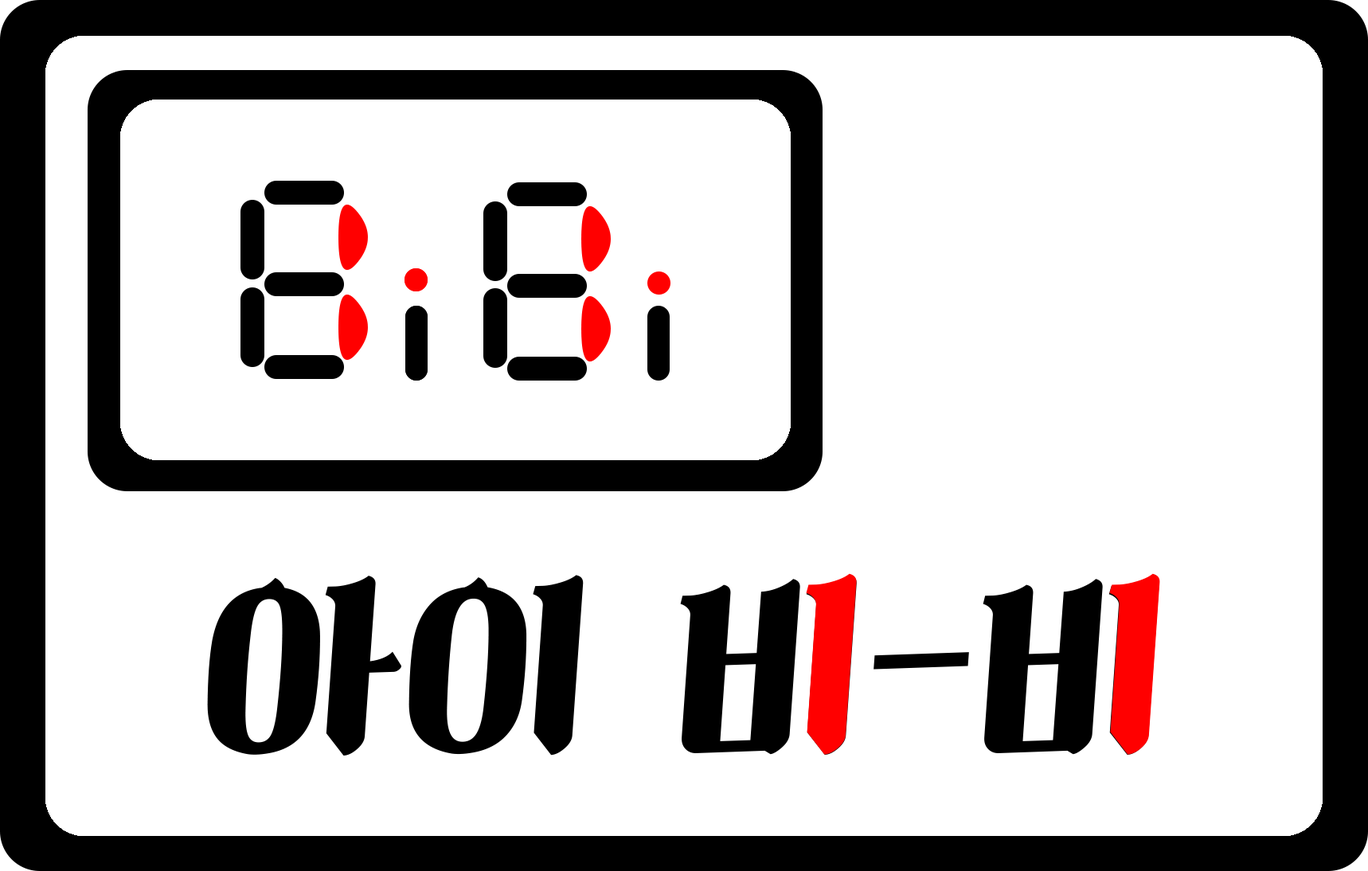
<style>
.page{position:relative;width:1368px;height:871px;background:#ffffff}
.page>*{position:absolute;margin:0}
.t1{font:202.7px "KoreanJMDB-R";color:#000000}
.t2{font:203.2px "KoreanJMDB-R";color:#ff0000}
</style>
<div class="page">
<p class="t1" style="left:207px;top:575px;width:953px;height:181px">아이 비-비</p>
<p class="t2" style="left:806px;top:573px;width:51px;height:182px">ㅣ</p>
<p class="t2" style="left:1110px;top:573px;width:51px;height:182px">ㅣ</p>
</div>
